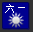
<style>
.page{position:relative;width:33px;height:32px;background:#000090}
.page>*{position:absolute;margin:0}
.t1{font:10.4px "SimSun";color:#ffffff}
</style>
<div class="page">
<p class="t1" style="left:5px;top:4px;width:20px;height:9px">六一</p>
</div>
